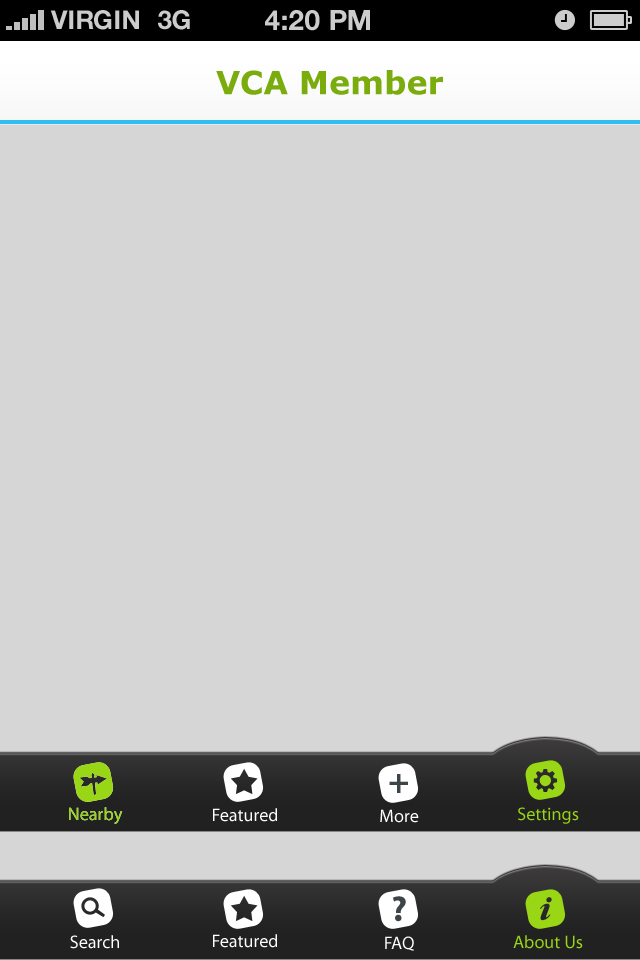
<style>
.page{position:relative;width:640px;height:960px;background:#d6d6d6}
.page>*{position:absolute;margin:0}
.t1{font:26px "HelveticaNeue-Bold";color:#cccccc;text-transform:uppercase}
.t2{font:28px "HelveticaNeue-Bold";color:#cccccc;text-transform:uppercase}
.t3{font:31.9px "Verdana-Bold";color:#79ac0c}
.t4{font:36px "MyriadPro-Bold";color:#3d4548}
.t5{font:18.1px "MyriadPro-Regular";color:#99d615}
.t6{font:18.1px "MyriadPro-Regular";color:#ffffff}
</style>
<div class="page">
<p class="t1" style="left:50px;top:10px;width:89px;height:20px">VIRGIN</p>
<p class="t1" style="left:158px;top:10px;width:32px;height:20px">3G</p>
<p class="t2" style="left:265px;top:10px;width:105px;height:21px">4:20 pM</p>
<p class="t3" style="left:216px;top:70px;width:227px;height:25px">VCA Member</p>
<p class="t4" style="left:389px;top:774px;width:19px;height:19px">+</p>
<p class="t5" style="left:69px;top:807px;width:54px;height:17px">Nearby</p>
<p class="t5" style="left:69px;top:807px;width:54px;height:17px">Nearby</p>
<p class="t6" style="left:213px;top:808px;width:64px;height:14px">Featured</p>
<p class="t6" style="left:380px;top:809px;width:39px;height:14px">More</p>
<p class="t5" style="left:518px;top:807px;width:61px;height:17px">Settings</p>
<p class="t4" style="left:392px;top:896px;width:14px;height:26px">?</p>
<p class="t6" style="left:70px;top:935px;width:49px;height:14px">Search</p>
<p class="t6" style="left:213px;top:934px;width:64px;height:14px">Featured</p>
<p class="t6" style="left:385px;top:936px;width:29px;height:15px">FAQ</p>
<p class="t5" style="left:513px;top:935px;width:70px;height:14px">About Us</p>
</div>
